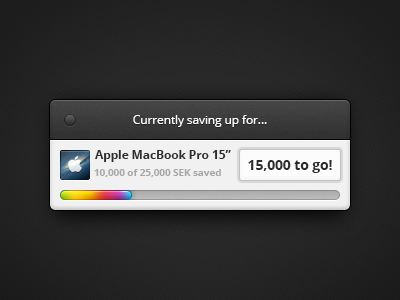
<style>
.page{position:relative;width:400px;height:300px}
.page>*{position:absolute;margin:0}
.t1{font:12px "OpenSans";letter-spacing:-0.01em;color:#ffffff}
.t2{font:12px "OpenSans-Bold";letter-spacing:-0.01em;color:#2d2d2d}
.t3{font:14px "OpenSans-Bold";letter-spacing:-0.01em;color:#2d2d2d}
.t4{font:10px "OpenSans-Bold";letter-spacing:-0.01em;color:#a6a6a6}
</style>
<div class="page">
<p class="t1" style="left:133px;top:115px;width:134px;height:12px">Currently saving up for...</p>
<p class="t2" style="left:95px;top:150px;width:136px;height:12px">Apple MacBook Pro 15”</p>
<p class="t3" style="left:248px;top:160px;width:84px;height:13px">15,000 to go!</p>
<p class="t4" style="left:94px;top:169px;width:127px;height:8px">10,000 of 25,000 SEK saved</p>
</div>
